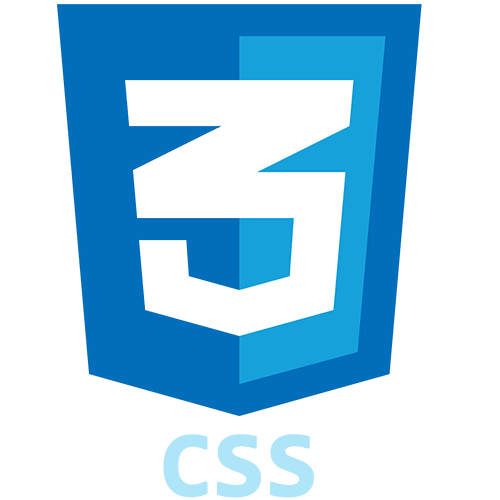
<style>
.page{position:relative;width:500px;height:500px;background:#ffffff}
.page>*{position:absolute;margin:0}
.t1{font:91.7px "Consolas-Bold";color:#aee5f9;font-weight:bold}
</style>
<div class="page">
<p class="t1" style="left:163px;top:434px;width:151px;height:64px">CSS</p>
</div>
